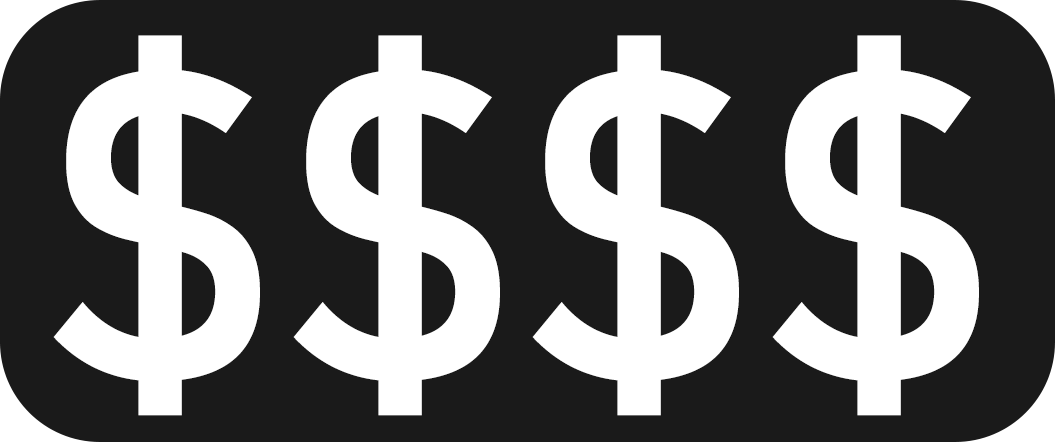
<style>
.page{position:relative;width:1055px;height:442px;background:#1a1a1a}
.page>*{position:absolute;margin:0}
.t1{font:429.9px "Bahnschrift";color:#ffffff}
</style>
<div class="page">
<p class="t1" style="left:53px;top:35px;width:926px;height:381px">$$$$</p>
</div>
